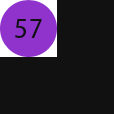
<style>
.page{position:relative;width:114px;height:114px;background:#111111}
.page>*{position:absolute;margin:0}
.t1{font:29px "MyriadPro-SemiCn";letter-spacing:0.05em;color:#111111}
</style>
<div class="page">
<p class="t1" style="left:15px;top:19px;width:27px;height:19px">57</p>
</div>
